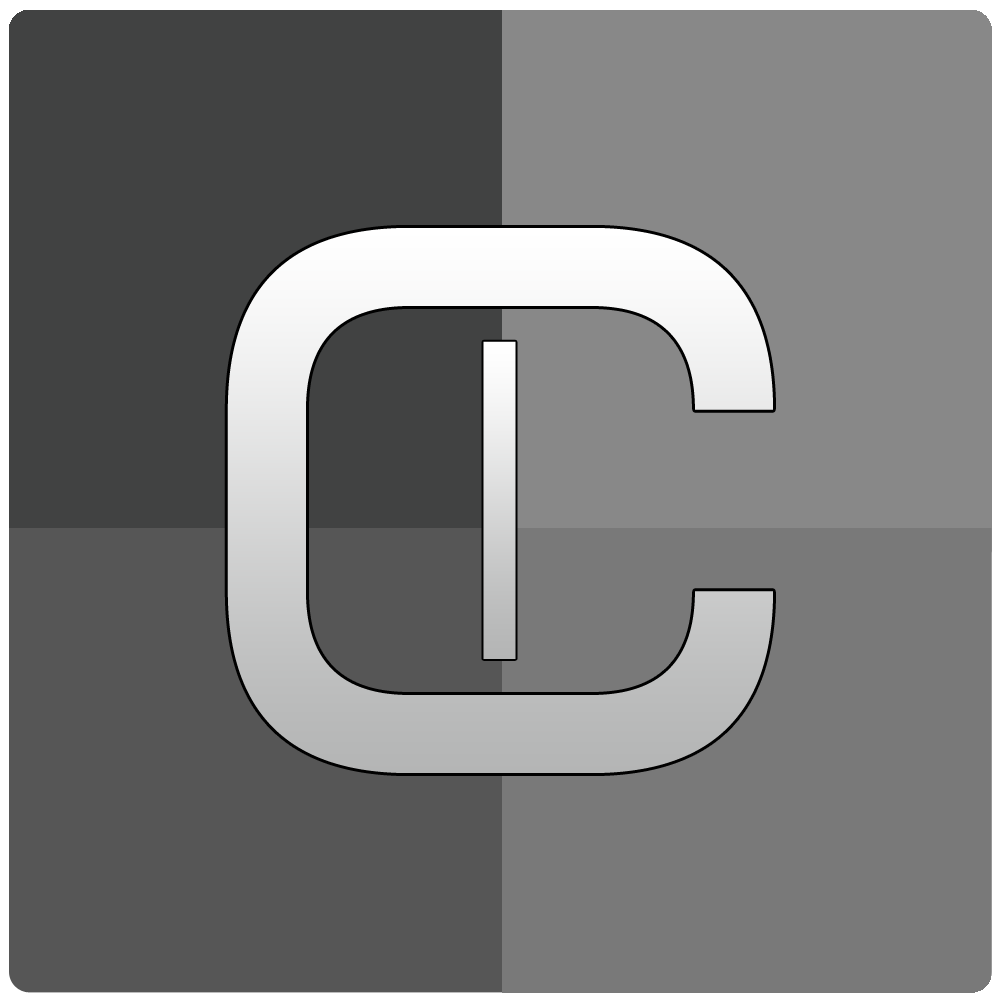
<style>
.page{position:relative;width:1000px;height:1000px;background:#888888}
.page>*{position:absolute;margin:0}
.t1{font:1063px "NotJustGroovy"}
.t2{font:433px "NotJustGroovy"}
</style>
<div class="page">
<p class="t1" style="left:227px;top:228px;width:546px;height:545px">c</p>
<p class="t2" style="left:483px;top:341px;width:33px;height:318px">l</p>
</div>
